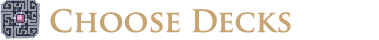
<style>
.page{position:relative;width:379px;height:40px;background:#ffffff}
.page>*{position:absolute;margin:0}
.t1{font:30px "TrajanPro-Bold";color:#c6a573}
</style>
<div class="page">
<p class="t1" style="left:50px;top:8px;width:241px;height:25px">Choose Decks</p>
</div>
